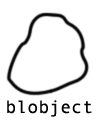
<style>
.page{position:relative;width:100px;height:120px;background:#ffffff}
.page>*{position:absolute;margin:0}
.t1{font:18px "AndaleMono";letter-spacing:0.01em;color:#000000}
</style>
<div class="page">
<p class="t1" style="left:7px;top:100px;width:85px;height:17px">blobject</p>
</div>
